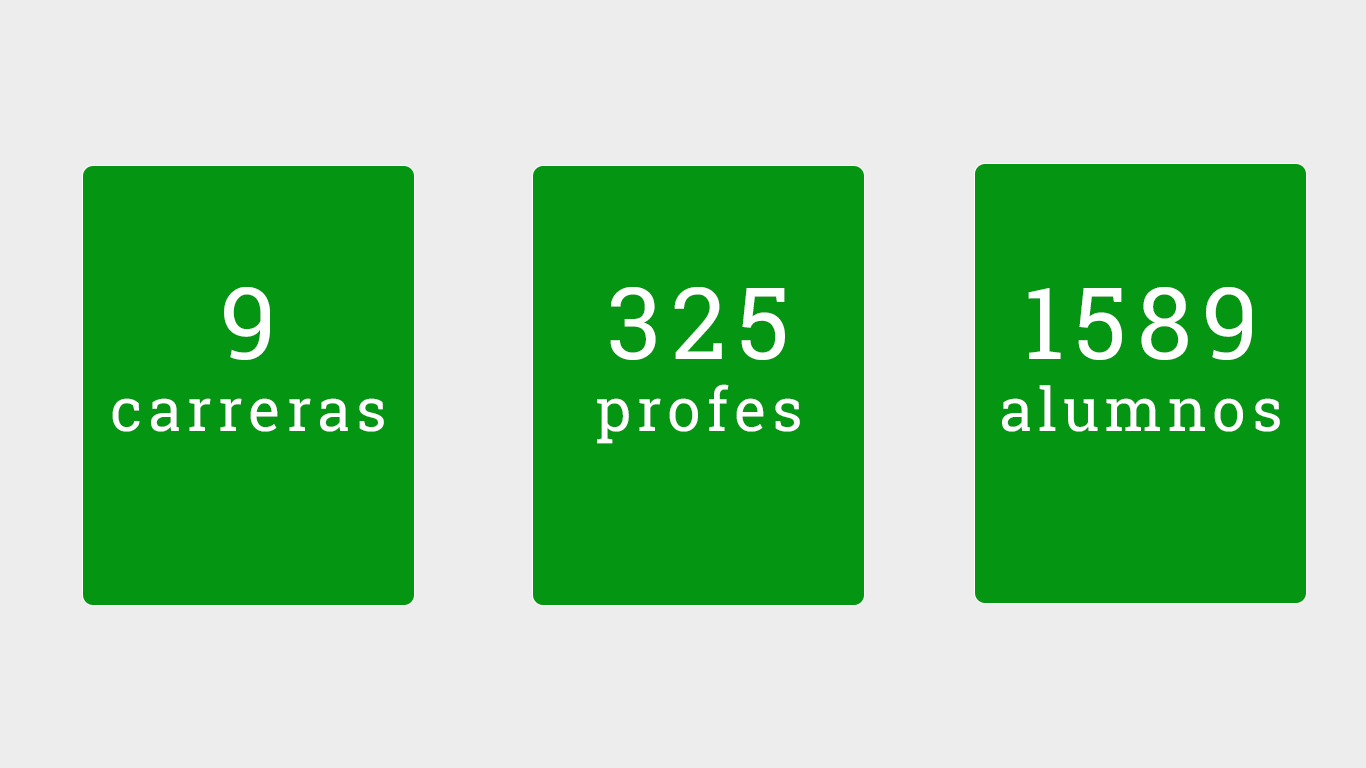
<style>
.page{position:relative;width:1366px;height:768px;background:#ededed}
.page>*{position:absolute;margin:0}
.t1{font:60px "RobotoSlab-Regular";letter-spacing:0.1em;color:#ffffff}
.t2{font:100px "RobotoSlab-Regular";letter-spacing:0.1em;color:#ffffff}
</style>
<div class="page">
<p class="t1" style="left:112px;top:287px;width:272px;height:145px;text-align:center"><span class="t2">9<br></span>carreras</p>
<p class="t1" style="left:597px;top:287px;width:203px;height:157px;text-align:center"><span class="t2">325<br></span>profes</p>
<p class="t1" style="left:1002px;top:287px;width:278px;height:145px;text-align:center"><span class="t2">1589<br></span>alumnos</p>
</div>
